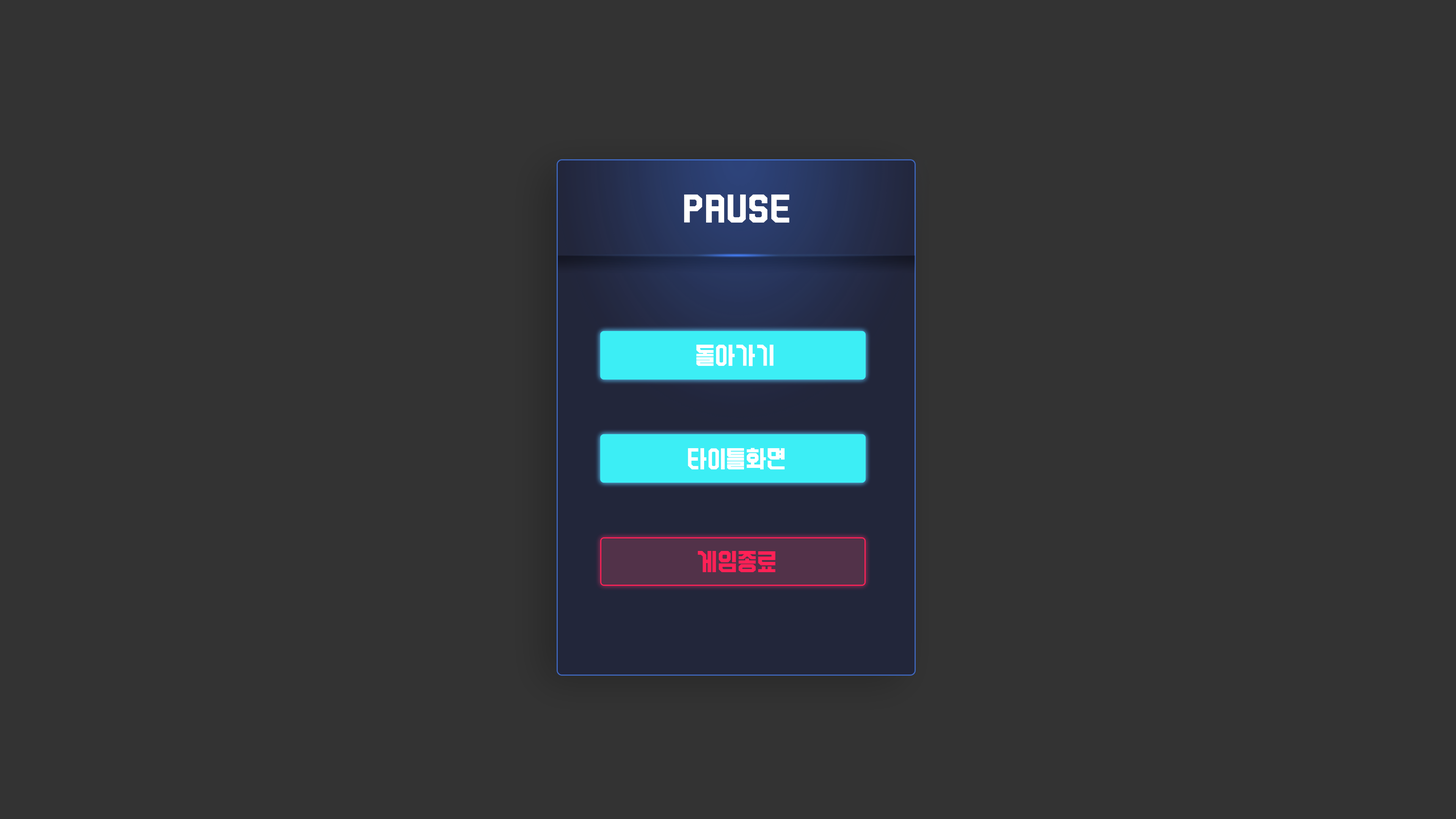
<style>
.page{position:relative;width:1456px;height:819px;background:#333333}
.page>*{position:absolute;margin:0}
.t1{font:37.9px "PassionItself";letter-spacing:0.03em;color:#ffffff;scale:1.08 1}
.t2{font:28.4px "PassionItself";letter-spacing:0.02em;color:#ffffff;scale:1.08 1}
.t3{font:28.4px "PassionItself";letter-spacing:0.02em;color:#ffffff;scale:1.07 1}
.t4{font:28.4px "PassionItself";letter-spacing:0.02em;color:#ff2156;text-transform:uppercase;scale:1.08 1}
</style>
<div class="page">
<p class="t1" style="left:684px;top:195px;width:105px;height:28px">PAUSE</p>
<p class="t2" style="left:696px;top:345px;width:77px;height:21px">돌아가기</p>
<p class="t2" style="left:696px;top:345px;width:77px;height:21px">돌아가기</p>
<p class="t3" style="left:688px;top:448px;width:97px;height:21px">타이틀화면</p>
<p class="t3" style="left:688px;top:448px;width:97px;height:21px">타이틀화면</p>
<p class="t4" style="left:698px;top:551px;width:77px;height:21px">게임종료</p>
</div>
